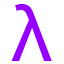
<style>
.page{position:relative;width:64px;height:64px;background:#ffffff}
.page>*{position:absolute;margin:0}
.t1{font:79.2px "AktivGrotesk-Regular";color:#9600ff}
</style>
<div class="page">
<p class="t1" style="left:11px;top:4px;width:41px;height:57px">λ</p>
</div>
